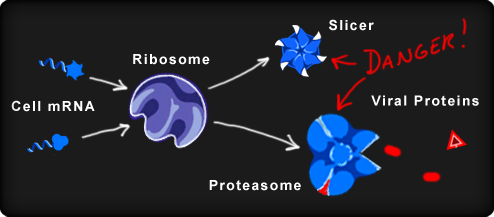
<style>
.page{position:relative;width:494px;height:217px;background:#1b1b1b}
.page>*{position:absolute;margin:0}
.t1{font:14px "Arial-BoldMT";letter-spacing:0.1em;color:#ffffff}
</style>
<div class="page">
<p class="t1" style="left:329px;top:19px;width:45px;height:12px">Slicer</p>
<p class="t1" style="left:133px;top:54px;width:77px;height:11px">Ribosome</p>
<p class="t1" style="left:11px;top:100px;width:84px;height:12px">Cell mRNA</p>
<p class="t1" style="left:371px;top:95px;width:108px;height:11px">Viral Proteins</p>
<p class="t1" style="left:209px;top:180px;width:92px;height:11px">Proteasome</p>
</div>
